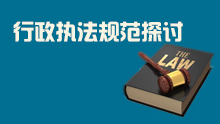
<style>
.page{position:relative;width:220px;height:124px;background:#016f92}
.page>*{position:absolute;margin:0}
.t1{font:21.3px "hzgb";color:#f8f5e4}
</style>
<div class="page">
<p class="t1" style="left:13px;top:21px;width:170px;height:21px">行政执法规范探讨</p>
</div>
